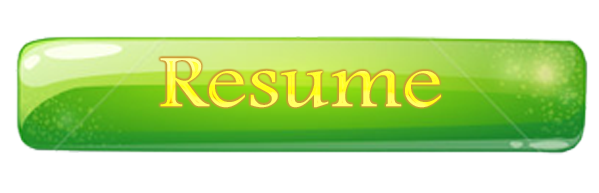
<style>
.page{position:relative;width:599px;height:193px;background:#ffffff}
.page>*{position:absolute;margin:0}
.t1{font:76.6px "K-Sina";scale:1.19 1}
</style>
<div class="page">
<p class="t1" style="left:160px;top:58px;width:281px;height:50px">Resume</p>
</div>
